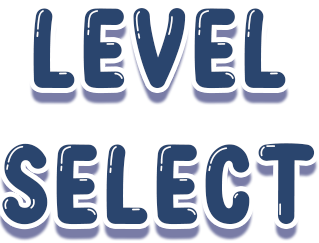
<style>
.page{position:relative;width:319px;height:243px;background:#ffffff}
.page>*{position:absolute;margin:0}
.t1{font:114px "BubbleBobble";color:#2a456e}
</style>
<div class="page">
<p class="t1" style="left:2px;top:8px;width:313px;height:217px;text-align:center">LEVEL<br>SELECT</p>
</div>
